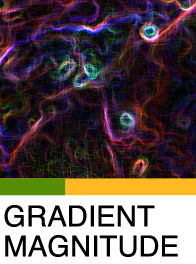
<style>
.page{position:relative;width:196px;height:264px}
.page>*{position:absolute;margin:0}
.t1{font:28.9px/30px "Helvetica";color:#000000}
</style>
<div class="page">
<p class="t1" style="left:4px;top:205px;width:174px;height:52px">GRADIENT<br>MAGNITUDE</p>
</div>
